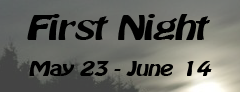
<style>
.page{position:relative;width:240px;height:92px}
.page>*{position:absolute;margin:0}
.t1{font:30px "Batavia";color:#000000}
.t2{font:18px "Batavia";color:#000000}
</style>
<div class="page">
<p class="t1" style="left:9px;top:12px;width:221px;height:45px">First Night</p>
<p class="t2" style="left:12px;top:48px;width:217px;height:35px;text-align:center">May 23 - June 14</p>
</div>
